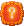
<style>
.page{position:relative;width:24px;height:26px}
.page>*{position:absolute;margin:0}
.t1{font:14.7px "MS-PMincho"}
</style>
<div class="page">
<p class="t1" style="left:8px;top:7px;width:7px;height:12px">?</p>
</div>
